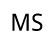
<style>
.page{position:relative;width:53px;height:41px;background:#ffffff}
.page>*{position:absolute;margin:0}
.t1{font:23.7px "DroidSans";color:#000000}
</style>
<div class="page">
<p class="t1" style="left:12px;top:13px;width:31px;height:18px">MS</p>
</div>
